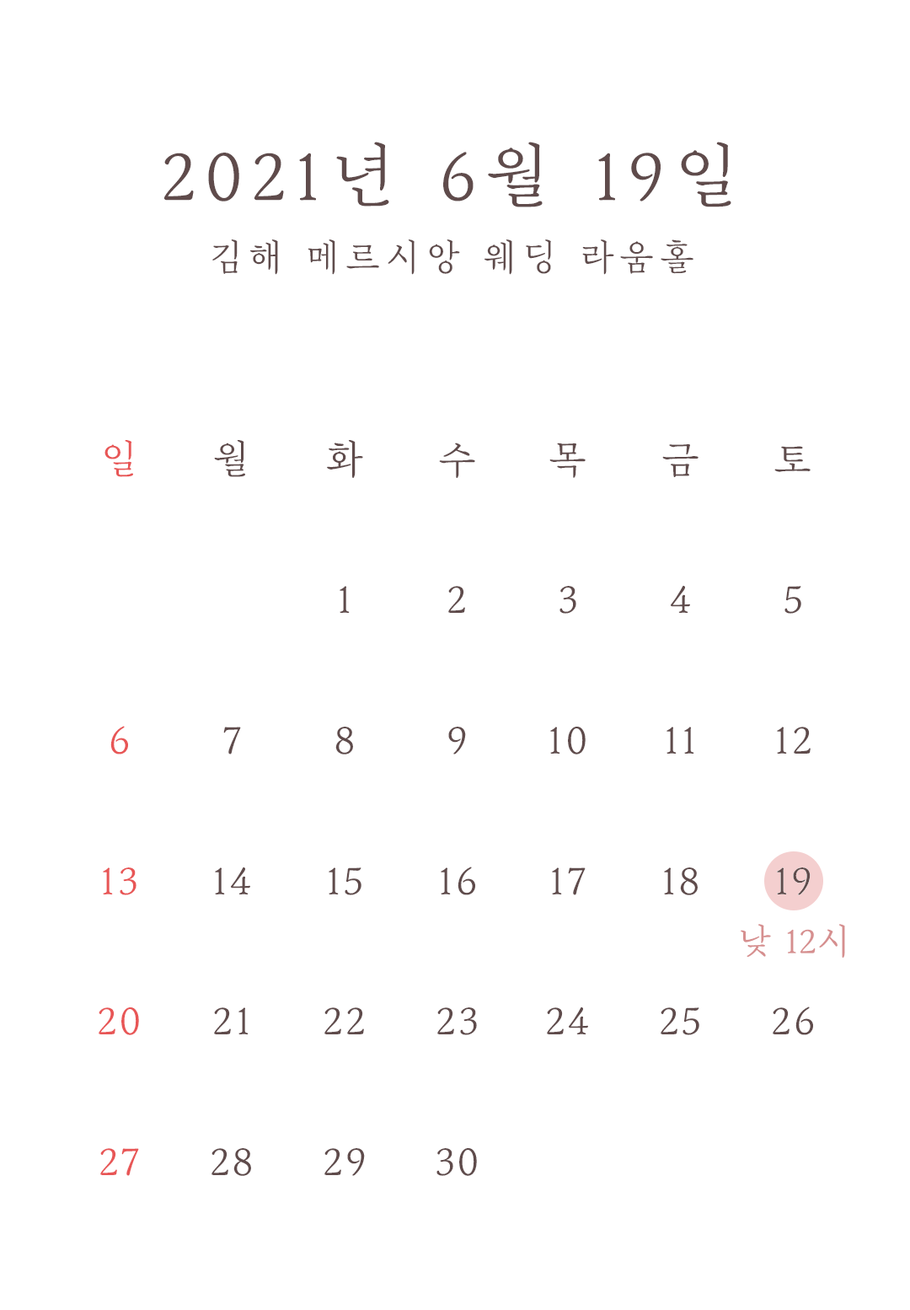
<style>
.page{position:relative;width:910px;height:1310px;background:#ffffff}
.page>*{position:absolute;margin:0}
.t1{font:36.4px/70.2px "MapoGoldenPier";letter-spacing:0.1em;color:#5f4b4b}
.t2{font:70.2px/70.2px "MapoGoldenPier";letter-spacing:0.1em;color:#5f4b4b}
.t3{font:39.9px/70.2px "MapoGoldenPier";letter-spacing:0.05em;color:#e85656}
.t4{font:39.9px/70.2px "MapoGoldenPier";letter-spacing:0.05em;color:#5f4b4b}
.t5{font:35.1px "MapoGoldenPier";color:#d68f8f}
</style>
<div class="page">
<p class="t1" style="left:164px;top:142px;width:568px;height:133px;text-align:center"><span class="t2">2021년 6월 19일<br></span>김해 메르시앙 웨딩 라움홀</p>
<p class="t3" style="left:99px;top:440px;width:40px;height:736px;text-align:center">일<br><br><br><br>6<br><br>13<br><br>20<br><br>27</p>
<p class="t4" style="left:212px;top:440px;width:39px;height:736px;text-align:center">월<br><br><br><br>7<br><br>14<br><br>21<br><br>28</p>
<p class="t4" style="left:325px;top:440px;width:40px;height:736px;text-align:center">화<br><br>1<br><br>8<br><br>15<br><br>22<br><br>29</p>
<p class="t4" style="left:437px;top:443px;width:40px;height:733px;text-align:center">수<br><br>2<br><br>9<br><br>16<br><br>23<br><br>30</p>
<p class="t4" style="left:547px;top:443px;width:41px;height:591px;text-align:center">목<br><br>3<br><br>10<br><br>17<br><br>24</p>
<p class="t4" style="left:661px;top:443px;width:39px;height:592px;text-align:center">금<br><br>4<br><br>11<br><br>18<br><br>25</p>
<p class="t4" style="left:773px;top:446px;width:40px;height:589px;text-align:center">토<br><br>5<br><br>12<br><br>19<br><br>26</p>
<p class="t5" style="left:741px;top:924px;width:104px;height:34px">낮 12시</p>
</div>
